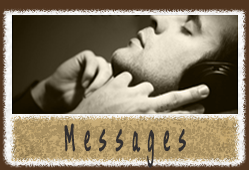
<style>
.page{position:relative;width:249px;height:170px}
.page>*{position:absolute;margin:0}
.t1{font:44.2px "BuxtonSketch";letter-spacing:0.5em;color:#322f2f;font-weight:bold;scale:0.38 1}
</style>
<div class="page">
<p class="t1" style="left:64px;top:123px;width:122px;height:45px">Messages</p>
</div>
